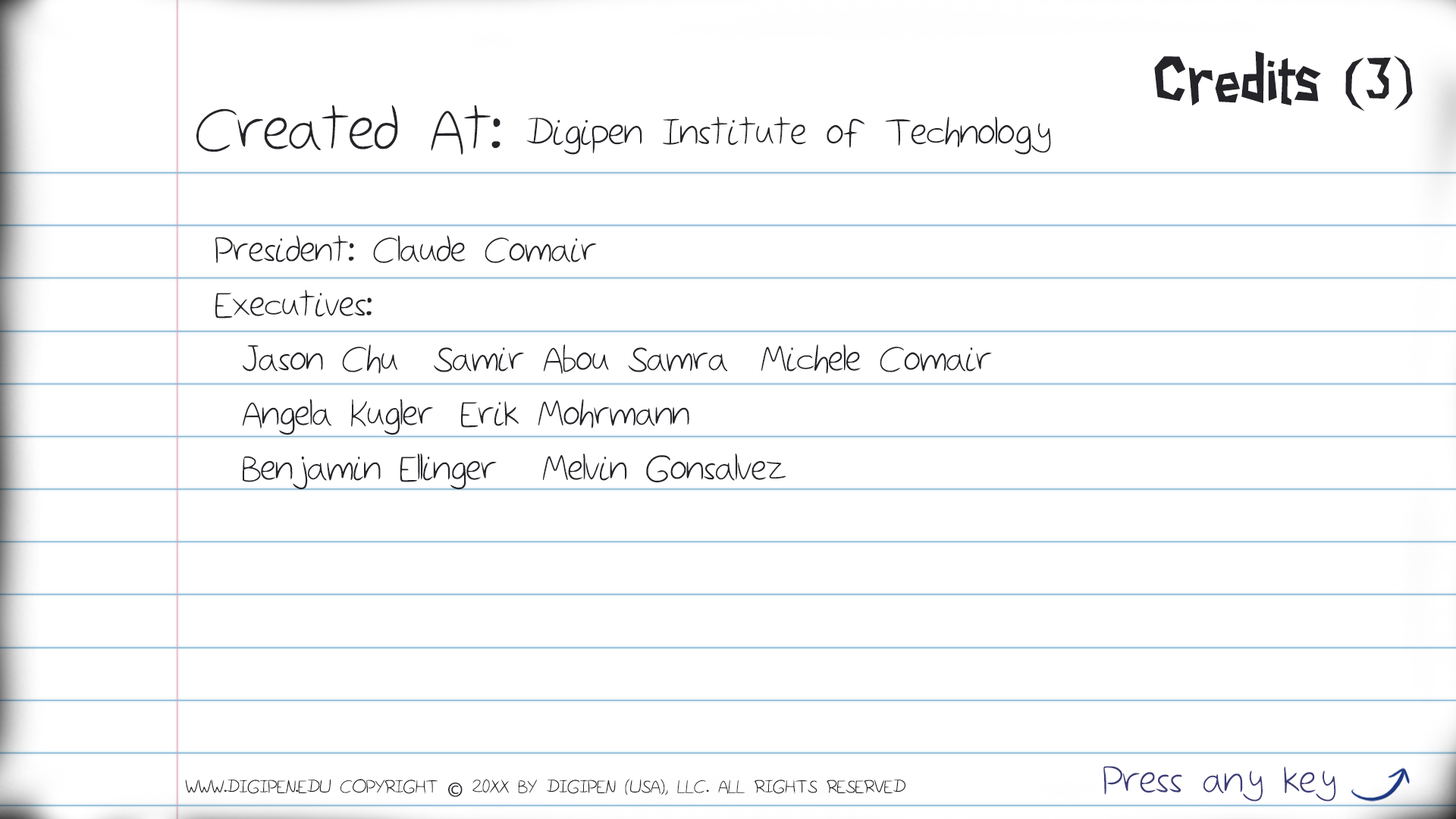
<style>
.page{position:relative;width:1456px;height:819px;background:#ffffff}
.page>*{position:absolute;margin:0}
.t1{font:59.4px "PaperCuts2";color:#242429}
.t2{font:77px "Sketchbook";color:#242429}
.t3{font:48px "Sketchbook";color:#242429}
.t4{font:45.5px "Sketchbook";color:#242429}
.t5{font:49.5px "Sketchbook";color:#3d3d78}
.t6{font:22.7px "Sketchbook";color:#242429}
.t7{font:22.7px "MyriadPro-Regular";color:#242429}
</style>
<div class="page">
<p class="t1" style="left:1154px;top:51px;width:259px;height:60px">Credits (3)</p>
<p class="t2" style="left:196px;top:105px;width:304px;height:50px">Created At:</p>
<p class="t3" style="left:526px;top:117px;width:525px;height:38px">Digipen Institute of Technology</p>
<p class="t4" style="left:215px;top:235px;width:777px;height:255px">President: Claude Comair<br>Executives:<br> Jason Chu  Samir Abou Samra  Michele Comair<br> Angela Kugler  Erik Mohrmann <br> Benjamin Ellinger  Melvin Gonsalvez</p>
<p class="t5" style="left:1103px;top:766px;width:233px;height:36px">Press any key</p>
<p class="t6" style="left:185px;top:779px;width:720px;height:18px">WWW.DIGIPEN.EDU COPYRIGHT <span class="t7">©</span> 20XX BY DIGIPEN (USA), LLC. ALL RIGHTS RESERVED</p>
</div>
